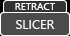
<style>
.page{position:relative;width:70px;height:36px;background:#4b4b4b}
.page>*{position:absolute;margin:0}
.t1{font:10px "SegoeUI";color:#ffffff}
.t2{font:13px "SegoeUI";color:#ffffff}
</style>
<div class="page">
<p class="t1" style="left:15px;top:3px;width:40px;height:7px">RETRACT</p>
<p class="t2" style="left:16px;top:20px;width:39px;height:9px">SLICER</p>
<p class="t2" style="left:16px;top:20px;width:39px;height:9px">SLICER</p>
</div>
